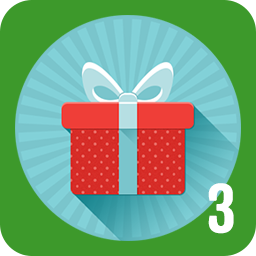
<style>
.page{position:relative;width:256px;height:256px;background:#3d992b}
.page>*{position:absolute;margin:0}
.t1{font:56.9px "FjallaOne-Regular";letter-spacing:-0.03em;color:#ffffff;text-transform:uppercase;font-weight:bold}
</style>
<div class="page">
<p class="t1" style="left:208px;top:183px;width:26px;height:51px">3</p>
</div>
